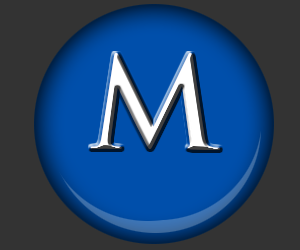
<style>
.page{position:relative;width:300px;height:250px;background:#333333}
.page>*{position:absolute;margin:0}
.t1{font:125px "TrajanPro-Bold";color:#ffffff}
</style>
<div class="page">
<p class="t1" style="left:90px;top:53px;width:130px;height:97px">M</p>
</div>
